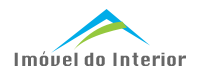
<style>
.page{position:relative;width:200px;height:75px;background:#ffffff}
.page>*{position:absolute;margin:0}
.t1{font:17.8px "Silom";color:#676767}
</style>
<div class="page">
<p class="t1" style="left:14px;top:51px;width:172px;height:15px">Imóvel do Interior</p>
</div>
